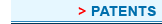
<style>
.page{position:relative;width:162px;height:24px;background:#e6f7ff}
.page>*{position:absolute;margin:0}
.t1{font:14px "Arial-BoldMT";letter-spacing:0.025em;color:#006fad}
.t2{font:14px "Arial-BoldMT";letter-spacing:0.025em;color:#ff0000}
</style>
<div class="page">
<p class="t1" style="left:78px;top:6px;width:78px;height:10px"><span class="t2">&gt; </span>PATENTS</p>
</div>
